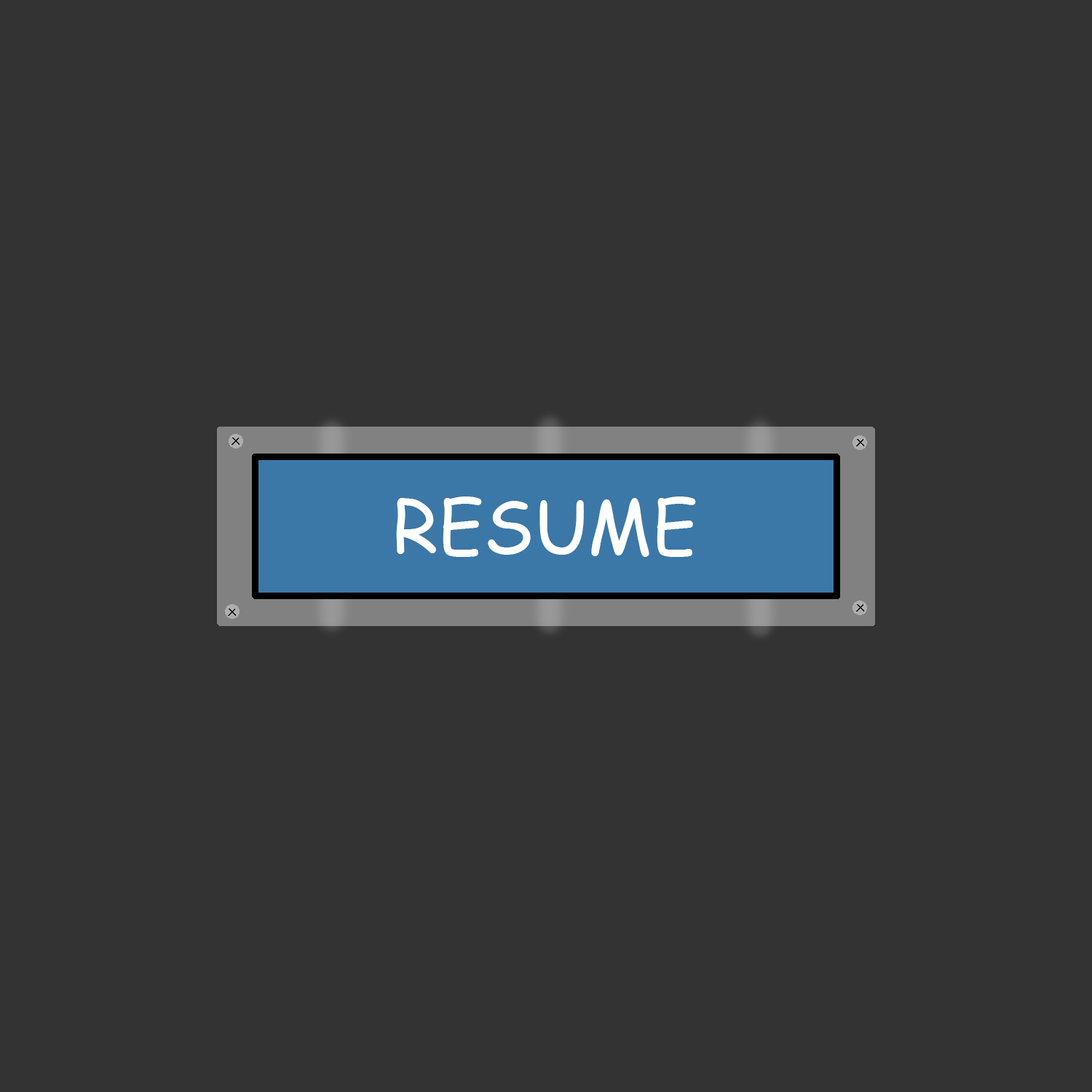
<style>
.page{position:relative;width:1092px;height:1092px;background:#333333}
.page>*{position:absolute;margin:0}
.t1{font:72.8px "ComicSansMS";color:#ffffff}
</style>
<div class="page">
<p class="t1" style="left:396px;top:496px;width:300px;height:61px">RESUME</p>
</div>
